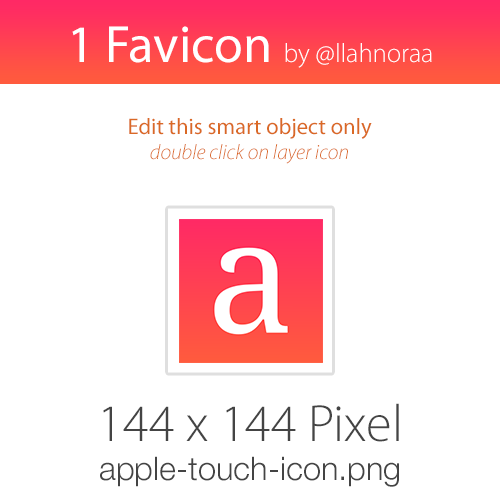
<style>
.page{position:relative;width:500px;height:500px;background:#ffffff}
.page>*{position:absolute;margin:0}
.t1{font:26.7px "MyriadPro-Light";color:#ffffff}
.t2{font:52.5px "MyriadPro-Regular";color:#ffffff}
.t3{font:22.5px "MyriadPro-Regular";color:#da6926}
.t4{font:21px "MyriadPro-LightIt";color:#da6926}
.t5{font:32.5px "HelveticaNeue-Light";color:#444444}
.t6{font:52.5px "MyriadPro-Light";color:#444444}
</style>
<div class="page">
<p class="t1" style="left:72px;top:26px;width:360px;height:42px"><span class="t2">1 Favicon </span>by @llahnoraa</p>
<p class="t3" style="left:129px;top:118px;width:243px;height:46px;text-align:center">Edit this smart object only<br><span class="t4">double click on layer icon</span></p>
<p class="t5" style="left:100px;top:403px;width:299px;height:84px;text-align:center"><span class="t6">144 x 144 Pixel<br></span>apple-touch-icon.png</p>
</div>
